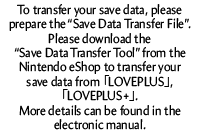
<style>
.page{position:relative;width:200px;height:134px;background:#ffffff}
.page>*{position:absolute;margin:0}
.t1{font:13.2px "Amira-Roman";color:#000000;scale:0.91 1}
.t2{font:13.2px "KozGoPr6N-Regular";color:#000000;scale:0.91 1}
</style>
<div class="page">
<p class="t1" style="left:9px;top:4px;width:182px;height:126px;text-align:center">To transfer your save data, please prepare the “Save Data Transfer File”. Please download the <br>“Save Data Transfer Tool” from the Nintendo eShop to transfer your <br>save data from <span class="t2">「</span>LOVEPLUS<span class="t2">」</span>, <br><span class="t2">「</span>LOVEPLUS+<span class="t2">」</span>. <br>More details can be found in the <br>electronic manual.</p>
</div>
